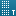
<style>
.page{position:relative;width:16px;height:16px}
.page>*{position:absolute;margin:0}
.t1{font:9px "Silkscreen";color:#ffffff}
</style>
<div class="page">
<p class="t1" style="left:12px;top:10px;width:3px;height:5px">T</p>
</div>
